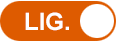
<style>
.page{position:relative;width:116px;height:41px;background:#de5b00}
.page>*{position:absolute;margin:0}
.t1{font:24px "Arial-BoldMT";color:#ffffff}
</style>
<div class="page">
<p class="t1" style="left:25px;top:12px;width:44px;height:19px">LIG.</p>
</div>
